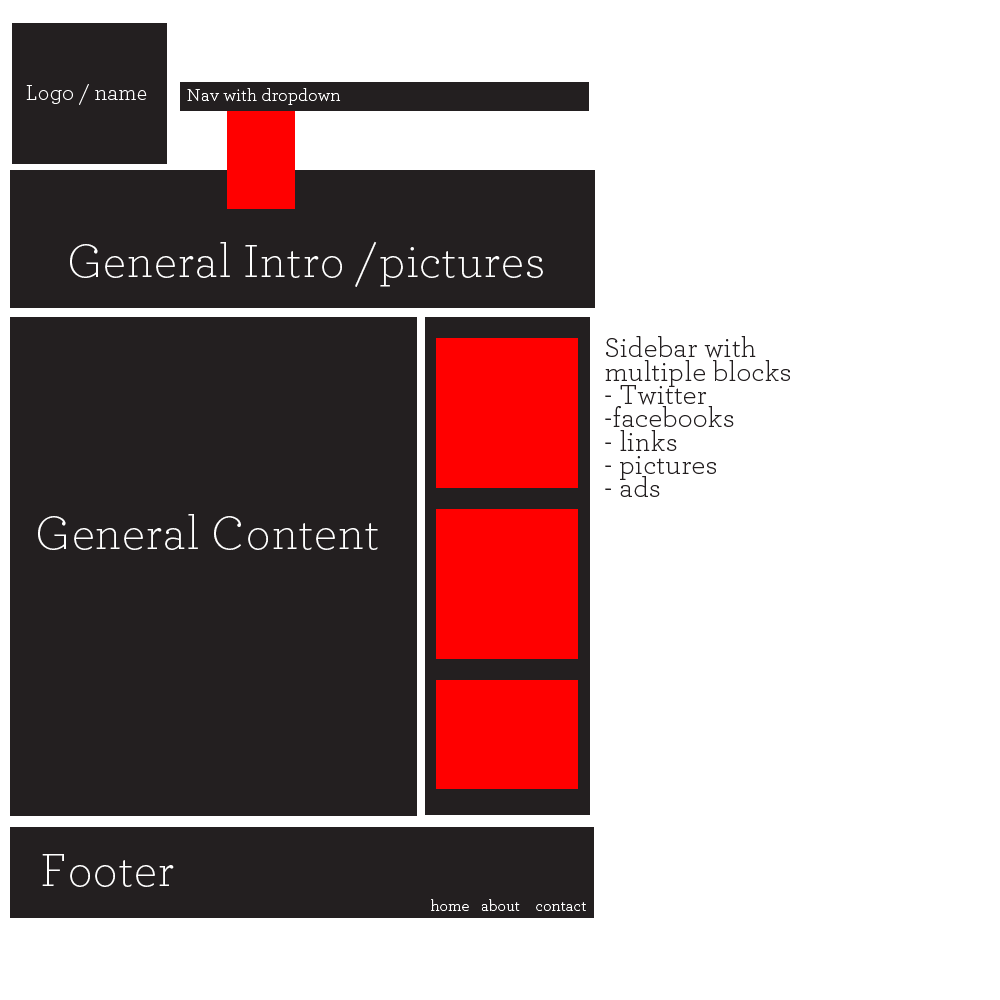
<style>
.page{position:relative;width:1000px;height:1000px;background:#ffffff}
.page>*{position:absolute;margin:0}
.t1{font:22.2px "Archer-Light";letter-spacing:0.02em;color:#ffffff}
.t2{font:18.2px "Archer-Light";letter-spacing:0.02em;color:#ffffff}
.t3{font:48px "Archer-Light";letter-spacing:0.02em;color:#ffffff}
.t4{font:28.3px/23.3px "Archer-Light";letter-spacing:0.02em;color:#231f20}
.t5{font:15.9px "Archer-Light";letter-spacing:0.02em;color:#ffffff}
</style>
<div class="page">
<p class="t1" style="left:26px;top:84px;width:121px;height:21px">Logo / name</p>
<p class="t2" style="left:187px;top:88px;width:154px;height:17px">Nav with dropdown</p>
<p class="t3" style="left:70px;top:241px;width:473px;height:46px">General Intro /pictures</p>
<p class="t4" style="left:605px;top:336px;width:185px;height:161px">Sidebar with<br>multiple blocks<br>- Twitter<br>-facebooks<br>- links<br>- pictures<br>- ads</p>
<p class="t3" style="left:38px;top:514px;width:340px;height:36px">General Content</p>
<p class="t3" style="left:42px;top:854px;width:132px;height:33px">Footer</p>
<p class="t5" style="left:431px;top:899px;width:155px;height:12px">home   about    contact</p>
</div>
